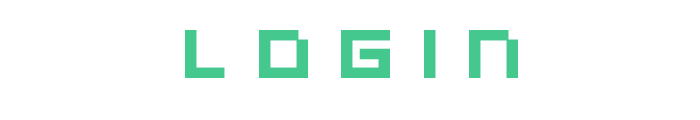
<style>
.page{position:relative;width:700px;height:120px;background:#ffffff}
.page>*{position:absolute;margin:0}
.t1{font:75px "VirtualDJ";letter-spacing:0.2em;color:#44c88d;font-weight:bold}
</style>
<div class="page">
<p class="t1" style="left:185px;top:30px;width:333px;height:48px">login</p>
</div>
